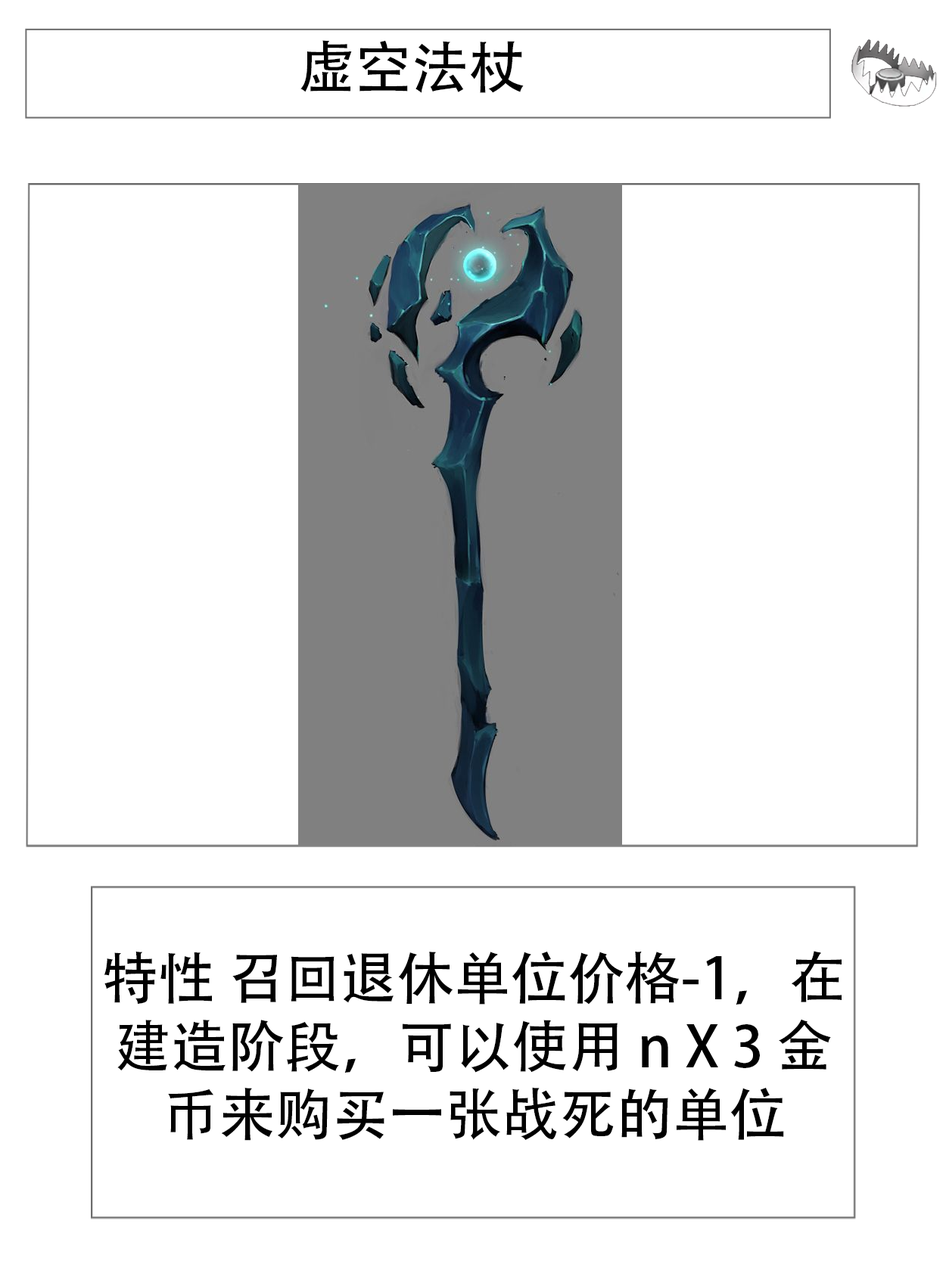
<style>
.page{position:relative;width:946px;height:1261px;background:#ffffff}
.page>*{position:absolute;margin:0}
.t1{font:56.7px "AdobeHeitiStd-Regular";color:#000000}
</style>
<div class="page">
<p class="t1" style="left:300px;top:40px;width:223px;height:53px">虚空法杖</p>
<p class="t1" style="left:104px;top:951px;width:737px;height:190px;text-align:center">特性 召回退休单位价格-1，在建造阶段，可以使用 n X 3 金币来购买一张战死的单位</p>
</div>
